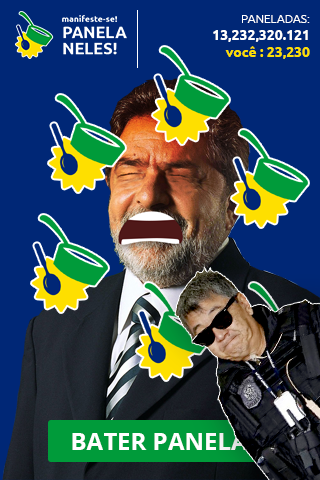
<style>
.page{position:relative;width:320px;height:480px;background:#002776}
.page>*{position:absolute;margin:0}
.t1{font:14px "Ubuntu-Bold";color:#ffffff}
.t2{font:12px "Ubuntu-Light";color:#ffffff}
.t3{font:14px "Ubuntu-Bold";color:#fedf00}
.t4{font:24px "OpenSans-Bold";color:#ffffff}
</style>
<div class="page">
<p class="t1" style="left:213px;top:15px;width:97px;height:44px;text-align:right"><span class="t2">PANELADAS:<br></span>13,232,320.121<br><span class="t3"> você : 23,230</span></p>
<p class="t4" style="left:72px;top:433px;width:176px;height:17px">BATER PANELA</p>
</div>
